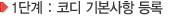
<style>
.page{position:relative;width:173px;height:18px;background:#ffffff}
.page>*{position:absolute;margin:0}
.t1{font:14.7px "YDIYGO330";letter-spacing:-0.03em;color:#373737;scale:0.92 1}
</style>
<div class="page">
<p class="t1" style="left:12px;top:1px;width:151px;height:14px">1단계 : 코디 기본사항 등록</p>
</div>
